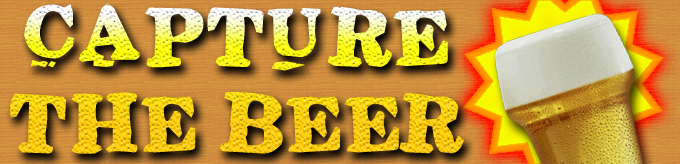
<style>
.page{position:relative;width:680px;height:164px}
.page>*{position:absolute;margin:0}
.t1{font:72px "Stickons-Two";font-weight:bold}
</style>
<div class="page">
<p class="t1" style="left:10px;top:4px;width:454px;height:150px;text-align:center">Capture<br>The Beer</p>
</div>
